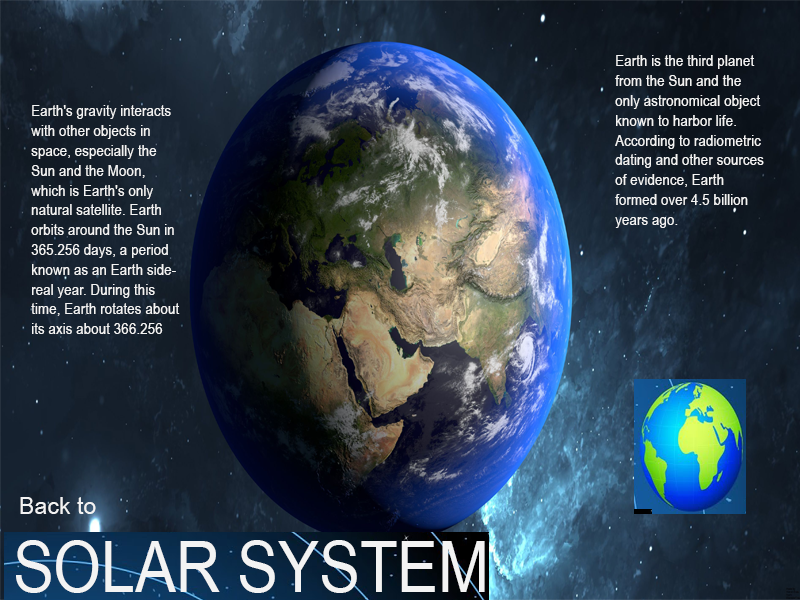
<style>
.page{position:relative;width:800px;height:600px}
.page>*{position:absolute;margin:0}
.t1{font:16.5px "ArialNarrow";color:#f3f3f3}
.t2{font:24px "ArialNarrow";color:#f3f3f3;scale:1.18 1}
.t3{font:71.1px "ArialNarrow";color:#f3f3f3;scale:1.05 1}
</style>
<div class="page">
<p class="t1" style="left:615px;top:55px;width:149px;height:173px">Earth is the third planet from the Sun and the only astronomical object known to harbor life. According to radiometric dating and other sources of evidence, Earth formed over 4.5 billion years ago.</p>
<p class="t1" style="left:31px;top:105px;width:149px;height:229px">Earth's gravity interacts with other objects in space, especially the Sun and the Moon, which is Earth's only natural satellite. Earth orbits around the Sun in 365.256 days, a period known as an Earth sidereal year. During this time, Earth rotates about its axis about 366.256 times.</p>
<p class="t2" style="left:20px;top:497px;width:76px;height:17px">Back to</p>
<p class="t3" style="left:16px;top:540px;width:469px;height:53px">SOLAR SYSTEM</p>
</div>
